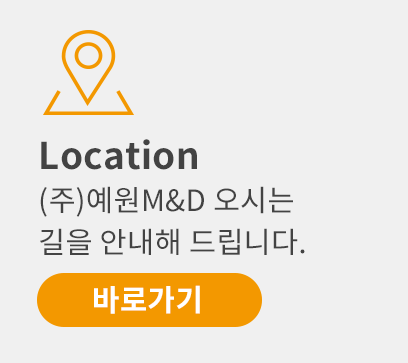
<style>
.page{position:relative;width:408px;height:363px;background:#f0f0f0}
.page>*{position:absolute;margin:0}
.t1{font:29.4px/42px "NotoSansCJKkr-Regular";letter-spacing:0.01em;color:#434343}
.t2{font:36.7px/37.2px "NotoSansCJKkr-Bold";letter-spacing:0.01em;color:#434343}
.t3{font:30px "NotoSansCJKkr-Bold";letter-spacing:0.01em;color:#ffffff}
</style>
<div class="page">
<p class="t1" style="left:40px;top:139px;width:265px;height:116px"><span class="t2">Location<br></span>(주)예원M&amp;D 오시는 <br>길을 안내해 드립니다.</p>
<p class="t3" style="left:94px;top:285px;width:106px;height:29px">바로가기</p>
</div>
